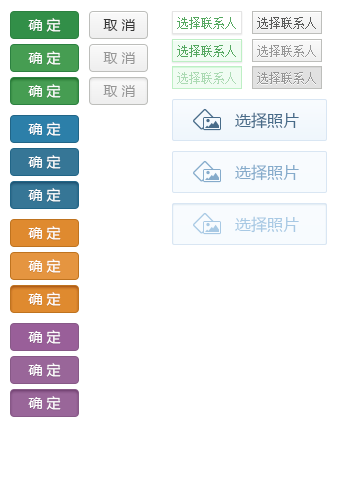
<style>
.page{position:relative;width:342px;height:492px;background:#ffffff}
.page>*{position:absolute;margin:0}
.t1{font:12px "SimSun";color:#55a860}
.t2{font:12px "SimSun";color:#595a59}
.t3{font:14px "MicrosoftYaHei";color:#ffffff}
.t4{font:14px "MicrosoftYaHei";color:#383838}
.t5{font:14px "MicrosoftYaHei";color:#969696}
.t6{font:12px "SimSun";color:#969696}
.t7{font:12px "SimSun";color:#abdab3}
.t8{font:16px "MicrosoftYaHei";color:#476b89}
.t9{font:16px "MicrosoftYaHei";color:#85abcb}
.t10{font:16px "MicrosoftYaHei";color:#a8c9e4}
</style>
<div class="page">
<p class="t1" style="left:177px;top:17px;width:59px;height:12px">选择联系人</p>
<p class="t2" style="left:257px;top:17px;width:59px;height:12px">选择联系人</p>
<p class="t3" style="left:28px;top:18px;width:33px;height:14px">确 定</p>
<p class="t4" style="left:103px;top:19px;width:32px;height:12px">取 消</p>
<p class="t3" style="left:28px;top:51px;width:33px;height:14px">确 定</p>
<p class="t5" style="left:103px;top:52px;width:32px;height:12px">取 消</p>
<p class="t1" style="left:177px;top:45px;width:59px;height:12px">选择联系人</p>
<p class="t6" style="left:257px;top:45px;width:59px;height:12px">选择联系人</p>
<p class="t7" style="left:177px;top:72px;width:59px;height:12px">选择联系人</p>
<p class="t6" style="left:257px;top:72px;width:59px;height:12px">选择联系人</p>
<p class="t3" style="left:28px;top:84px;width:33px;height:14px">确 定</p>
<p class="t5" style="left:103px;top:85px;width:32px;height:12px">取 消</p>
<p class="t8" style="left:235px;top:112px;width:64px;height:17px">选择照片</p>
<p class="t3" style="left:28px;top:122px;width:33px;height:14px">确 定</p>
<p class="t3" style="left:28px;top:155px;width:33px;height:14px">确 定</p>
<p class="t9" style="left:235px;top:164px;width:64px;height:17px">选择照片</p>
<p class="t3" style="left:28px;top:188px;width:33px;height:14px">确 定</p>
<p class="t10" style="left:235px;top:216px;width:64px;height:17px">选择照片</p>
<p class="t3" style="left:28px;top:226px;width:33px;height:14px">确 定</p>
<p class="t3" style="left:28px;top:259px;width:33px;height:14px">确 定</p>
<p class="t3" style="left:28px;top:292px;width:33px;height:14px">确 定</p>
<p class="t3" style="left:28px;top:330px;width:33px;height:14px">确 定</p>
<p class="t3" style="left:28px;top:363px;width:33px;height:14px">确 定</p>
<p class="t3" style="left:28px;top:396px;width:33px;height:14px">确 定</p>
</div>
